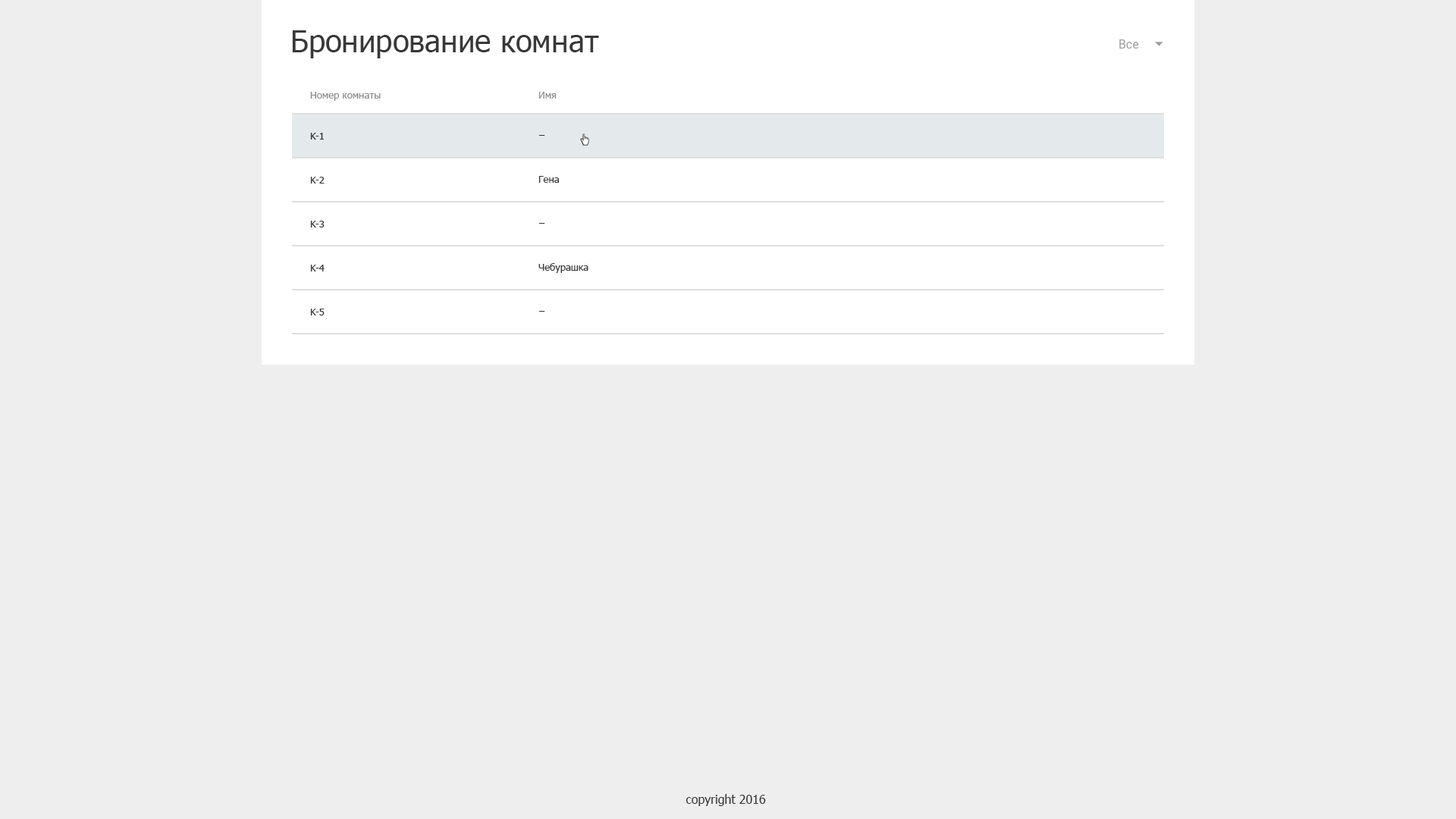
<style>
.page{position:relative;width:1456px;height:819px;background:#eeeeee}
.page>*{position:absolute;margin:0}
.t1{font:30.3px "Tahoma";color:#383838}
.t2{font:9.9px "Tahoma";color:#8f8f8f}
.t3{font:9.9px "Tahoma";color:#323334}
.t4{font:9.9px "Tahoma";color:#383838}
.t5{font:12.1px "Tahoma";color:#343434}
</style>
<div class="page">
<p class="t1" style="left:292px;top:30px;width:307px;height:28px">Бронирование комнат</p>
<p class="t2" style="left:310px;top:92px;width:71px;height:9px">Номер комнаты</p>
<p class="t2" style="left:538px;top:92px;width:19px;height:7px">Имя</p>
<p class="t3" style="left:310px;top:133px;width:14px;height:7px">K-1</p>
<p class="t3" style="left:538px;top:135px;width:7px;height:1px">–</p>
<p class="t4" style="left:310px;top:177px;width:15px;height:7px">K-2</p>
<p class="t4" style="left:538px;top:176px;width:21px;height:7px">Гена</p>
<p class="t4" style="left:310px;top:221px;width:15px;height:6px">K-3</p>
<p class="t4" style="left:538px;top:223px;width:7px;height:1px">–</p>
<p class="t4" style="left:310px;top:265px;width:15px;height:6px">K-4</p>
<p class="t4" style="left:538px;top:263px;width:50px;height:10px">Чебурашка</p>
<p class="t4" style="left:310px;top:309px;width:15px;height:6px">K-5</p>
<p class="t4" style="left:538px;top:311px;width:7px;height:1px">–</p>
<p class="t5" style="left:686px;top:794px;width:80px;height:12px">copyright 2016</p>
</div>
